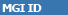
<style>
.page{position:relative;width:68px;height:15px;background:#3776ae}
.page>*{position:absolute;margin:0}
.t1{font:11px "Verdana-Bold";letter-spacing:-0.08em;color:#ffffff}
</style>
<div class="page">
<p class="t1" style="left:2px;top:4px;width:40px;height:8px">MGI ID</p>
</div>
